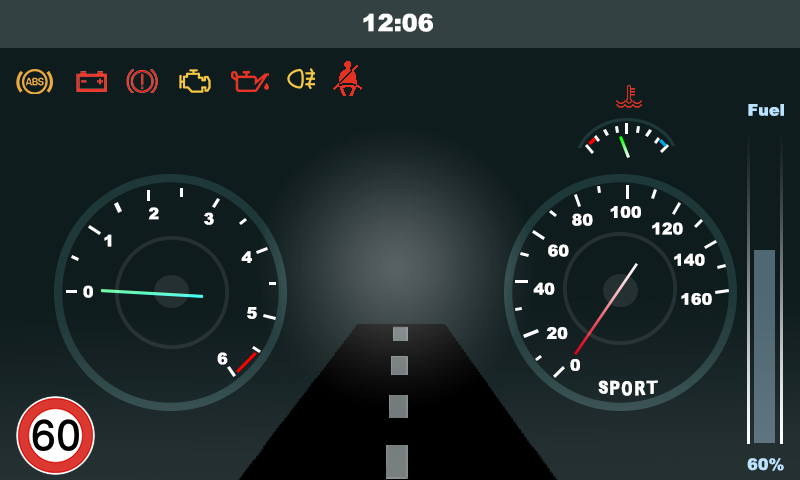
<style>
.page{position:relative;width:800px;height:480px;background:#0f1c1d}
.page>*{position:absolute;margin:0}
.t1{font:24px "Arial-Black";color:#ffffff}
.t2{font:16px "Arial-Black";color:#bbe3ff}
.t3{font:16px "Arial-Black";color:#ffffff}
</style>
<div class="page">
<p class="t1" style="left:363px;top:13px;width:70px;height:19px">12:06</p>
<p class="t2" style="left:748px;top:104px;width:36px;height:12px">Fuel</p>
<p class="t3" style="left:148px;top:207px;width:11px;height:13px">2</p>
<p class="t3" style="left:610px;top:206px;width:31px;height:12px">100</p>
<p class="t3" style="left:204px;top:212px;width:10px;height:13px">3</p>
<p class="t3" style="left:572px;top:213px;width:21px;height:13px">80</p>
<p class="t3" style="left:652px;top:222px;width:31px;height:13px">120</p>
<p class="t3" style="left:104px;top:234px;width:8px;height:13px">1</p>
<p class="t3" style="left:548px;top:244px;width:21px;height:13px">60</p>
<p class="t3" style="left:241px;top:251px;width:11px;height:12px">4</p>
<p class="t3" style="left:674px;top:253px;width:31px;height:13px">140</p>
<p class="t3" style="left:83px;top:285px;width:10px;height:13px">0</p>
<p class="t3" style="left:533px;top:282px;width:22px;height:13px">40</p>
<p class="t3" style="left:681px;top:293px;width:31px;height:12px">160</p>
<p class="t3" style="left:247px;top:307px;width:10px;height:12px">5</p>
<p class="t3" style="left:546px;top:327px;width:22px;height:13px">20</p>
<p class="t3" style="left:217px;top:352px;width:11px;height:13px">6</p>
<p class="t3" style="left:570px;top:359px;width:10px;height:12px">0</p>
<p class="t3" style="left:598px;top:380px;width:60px;height:16px">SPORT</p>
<p class="t2" style="left:747px;top:458px;width:37px;height:13px">60%</p>
</div>
